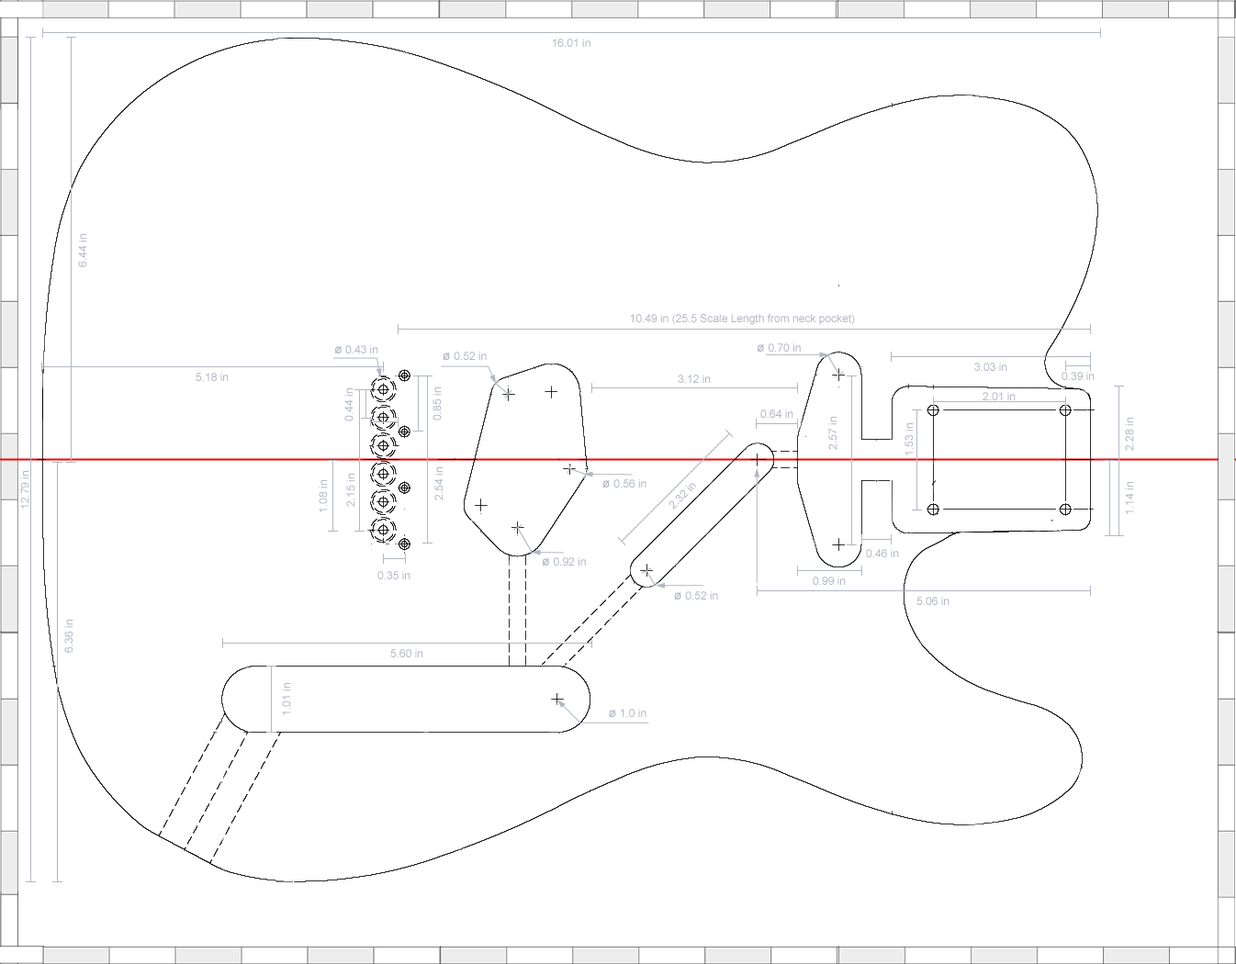
<style>
.page{position:relative;width:1236px;height:964px;background:#ffffff}
.page>*{position:absolute;margin:0}
.t1{font:11px "ArialMT";color:#b3b7c2}
.t2{font:12.9px "ArialMT";color:#b3b7c2}
</style>
<div class="page">
<p class="t1" style="left:553px;top:39px;width:38px;height:8px">16.01 in</p>
<p class="t1" style="left:78px;top:234px;width:9px;height:33px;rotate:-90deg">6.44 in</p>
<p class="t1" style="left:630px;top:314px;width:225px;height:11px">10.49 in (25.5 Scale Length from neck pocket)</p>
<p class="t1" style="left:335px;top:345px;width:43px;height:10px"><span class="t2">ø</span> 0.43 in</p>
<p class="t1" style="left:443px;top:352px;width:44px;height:9px"><span class="t2">ø </span>0.52 in</p>
<p class="t1" style="left:758px;top:344px;width:43px;height:9px"><span class="t2">ø </span>0.70 in</p>
<p class="t1" style="left:975px;top:363px;width:33px;height:8px">3.03 in</p>
<p class="t1" style="left:196px;top:373px;width:33px;height:8px">5.18 in</p>
<p class="t1" style="left:678px;top:375px;width:33px;height:8px">3.12 in</p>
<p class="t1" style="left:1062px;top:372px;width:33px;height:8px">0.39 in</p>
<p class="t1" style="left:344px;top:389px;width:10px;height:33px;rotate:-90deg">0.44 in</p>
<p class="t1" style="left:433px;top:388px;width:9px;height:33px;rotate:-90deg">0.85 in</p>
<p class="t1" style="left:983px;top:392px;width:33px;height:8px">2.01 in</p>
<p class="t1" style="left:761px;top:410px;width:33px;height:8px">0.64 in</p>
<p class="t1" style="left:829px;top:417px;width:9px;height:33px;rotate:-90deg">2.57 in</p>
<p class="t1" style="left:905px;top:423px;width:9px;height:33px;rotate:-90deg">1.53 in</p>
<p class="t1" style="left:1125px;top:418px;width:9px;height:33px;rotate:-90deg">2.28 in</p>
<p class="t1" style="left:20px;top:471px;width:9px;height:38px;rotate:-90deg">12.79 in</p>
<p class="t1" style="left:346px;top:474px;width:9px;height:33px;rotate:-90deg">2.15 in</p>
<p class="t1" style="left:434px;top:468px;width:10px;height:33px;rotate:-90deg">2.54 in</p>
<p class="t1" style="left:319px;top:480px;width:9px;height:33px;rotate:-90deg">1.08 in</p>
<p class="t1" style="left:603px;top:479px;width:44px;height:10px"><span class="t2">ø </span>0.56 in</p>
<p class="t1" style="left:669px;top:483px;width:28px;height:27px;rotate:-45deg">2.32 in</p>
<p class="t1" style="left:1125px;top:482px;width:9px;height:32px;rotate:-90deg">1.14 in</p>
<p class="t1" style="left:543px;top:558px;width:43px;height:9px"><span class="t2">ø </span>0.92 in</p>
<p class="t1" style="left:866px;top:549px;width:33px;height:9px">0.46 in</p>
<p class="t1" style="left:378px;top:571px;width:33px;height:9px">0.35 in</p>
<p class="t1" style="left:813px;top:577px;width:33px;height:8px">0.99 in</p>
<p class="t1" style="left:674px;top:592px;width:44px;height:9px"><span class="t2">ø </span>0.52 in</p>
<p class="t1" style="left:917px;top:597px;width:33px;height:8px">5.06 in</p>
<p class="t1" style="left:64px;top:620px;width:9px;height:33px;rotate:-90deg">6.36 in</p>
<p class="t1" style="left:390px;top:649px;width:33px;height:9px">5.60 in</p>
<p class="t1" style="left:282px;top:683px;width:9px;height:33px;rotate:-90deg">1.01 in</p>
<p class="t1" style="left:609px;top:709px;width:38px;height:9px"><span class="t2">ø </span>1.0 in</p>
</div>
